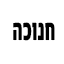
<style>
.page{position:relative;width:64px;height:64px;background:#ffffff}
.page>*{position:absolute;margin:0}
.t1{font:35.7px "FbAlbatros-Black";color:#000000;scale:0.53 1}
</style>
<div class="page">
<p class="t1" style="left:13px;top:22px;width:42px;height:19px">חנוכה</p>
</div>
